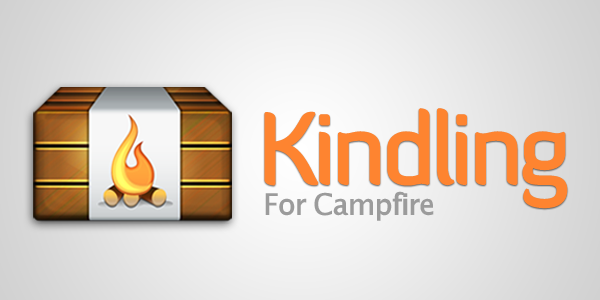
<style>
.page{position:relative;width:600px;height:300px}
.page>*{position:absolute;margin:0}
.t1{font:98px "DiavloBook-Regular";letter-spacing:-0.055em;color:#fe8430;font-weight:bold}
.t2{font:30px "LucidaGrande";letter-spacing:-0.05em;color:#9b9b9b}
</style>
<div class="page">
<p class="t1" style="left:264px;top:108px;width:304px;height:101px">Kindling</p>
<p class="t2" style="left:265px;top:191px;width:169px;height:30px">For Campfire</p>
</div>
